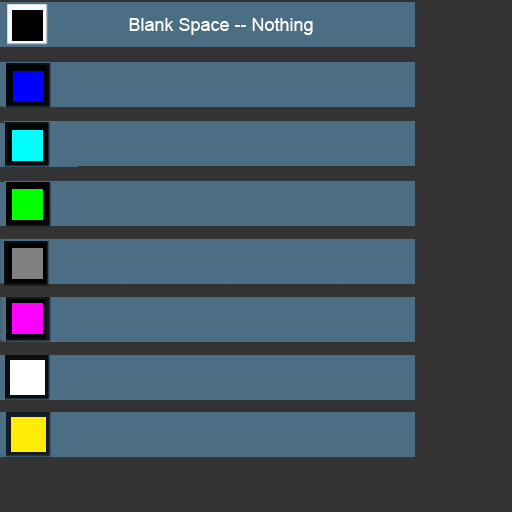
<style>
.page{position:relative;width:512px;height:512px;background:#4b6e85}
.page>*{position:absolute;margin:0}
.t1{font:18px "ArialMT";color:#fefefe}
</style>
<div class="page">
<p class="t1" style="left:129px;top:18px;width:184px;height:17px">Blank Space -- Nothing</p>
</div>
